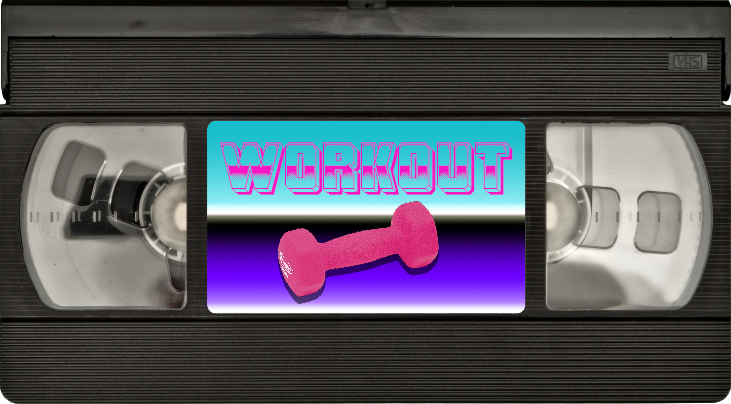
<style>
.page{position:relative;width:731px;height:404px}
.page>*{position:absolute;margin:0}
.t1{font:62.2px "Aerologica";color:#fa16c2}
</style>
<div class="page">
<p class="t1" style="left:220px;top:142px;width:293px;height:53px">WORKOUT</p>
</div>
